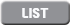
<style>
.page{position:relative;width:70px;height:25px;background:#919296}
.page>*{position:absolute;margin:0}
.t1{font:11px "HeadlineR-HM";letter-spacing:-0.02em;color:#f9fafc}
</style>
<div class="page">
<p class="t1" style="left:22px;top:8px;width:27px;height:10px">LIST</p>
</div>
